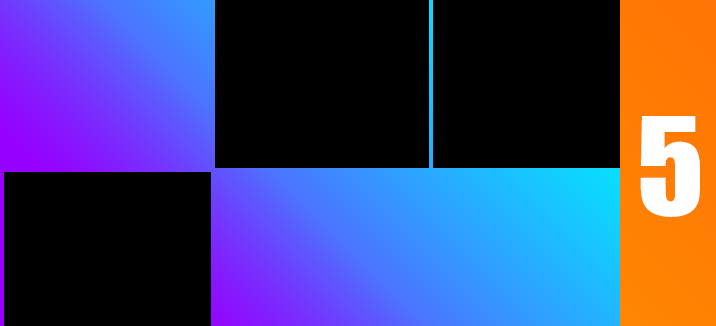
<style>
.page{position:relative;width:716px;height:326px;background:#000000}
.page>*{position:absolute;margin:0}
.t1{font:125px "Impact";color:#ffffff}
</style>
<div class="page">
<p class="t1" style="left:640px;top:116px;width:60px;height:101px">5</p>
</div>
